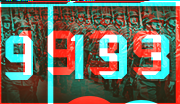
<style>
.page{position:relative;width:180px;height:104px}
.page>*{position:absolute;margin:0}
.t1{font:69px "Bombardier";letter-spacing:0.14em}
</style>
<div class="page">
<p class="t1" style="left:19px;top:29px;width:142px;height:45px">1939</p>
</div>
